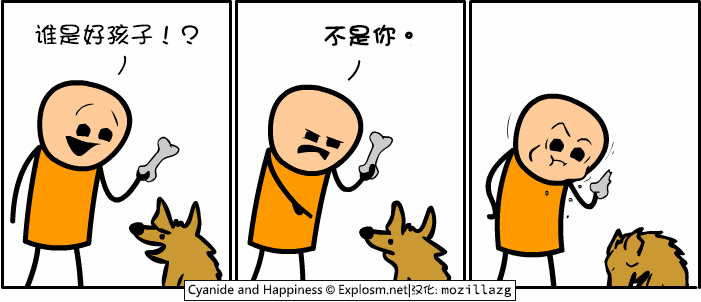
<style>
.page{position:relative;width:701px;height:302px;background:#fefefe}
.page>*{position:absolute;margin:0}
.t1{font:24px "DFGirl";color:#000000}
.t2{font:24px "DFGirl";color:#000000;font-weight:bold}
</style>
<div class="page">
<p class="t1" style="left:35px;top:24px;width:164px;height:21px">谁是好孩子！？</p>
<p class="t2" style="left:324px;top:24px;width:89px;height:23px">不是你。</p>
</div>
